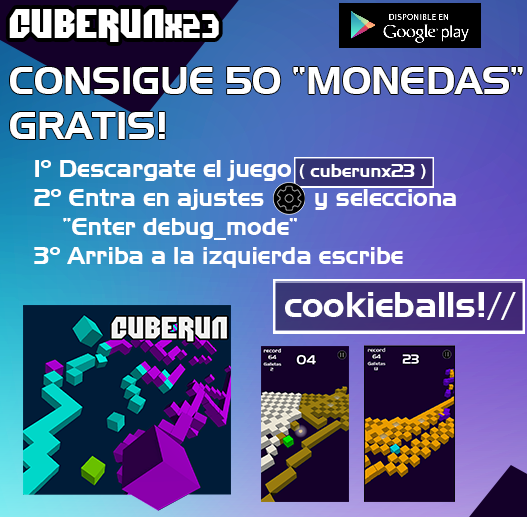
<style>
.page{position:relative;width:527px;height:517px}
.page>*{position:absolute;margin:0}
.t1{font:41.2px "Dimitri";color:#ffffff}
.t2{font:34.4px "Dimitri";color:#ffffff}
.t3{font:37.7px "AeroRegularSWFTE";color:#ffffff}
.t4{font:24px "AeroRegularSWFTE";color:#ffffff}
.t5{font:18px "AeroRegularSWFTE";color:#ffffff}
.t6{font:34.9px "AeroRegularSWFTE";color:#ffffff}
</style>
<div class="page">
<p class="t1" style="left:9px;top:9px;width:210px;height:33px">CUBERUN<span class="t2">x23</span></p>
<p class="t3" style="left:10px;top:67px;width:513px;height:72px">CONSIGUE 50 “MONEDAS”<br>GRATIS!</p>
<p class="t4" style="left:34px;top:160px;width:422px;height:108px">1º Descargate el juego <span class="t5">( cuberunx23 )<br></span>2º Entra en ajustes       y selecciona <br>    “Enter debug_mode”<br>3º Arriba a la izquierda escribe</p>
<p class="t6" style="left:285px;top:292px;width:231px;height:28px">cookieballs!//</p>
</div>
